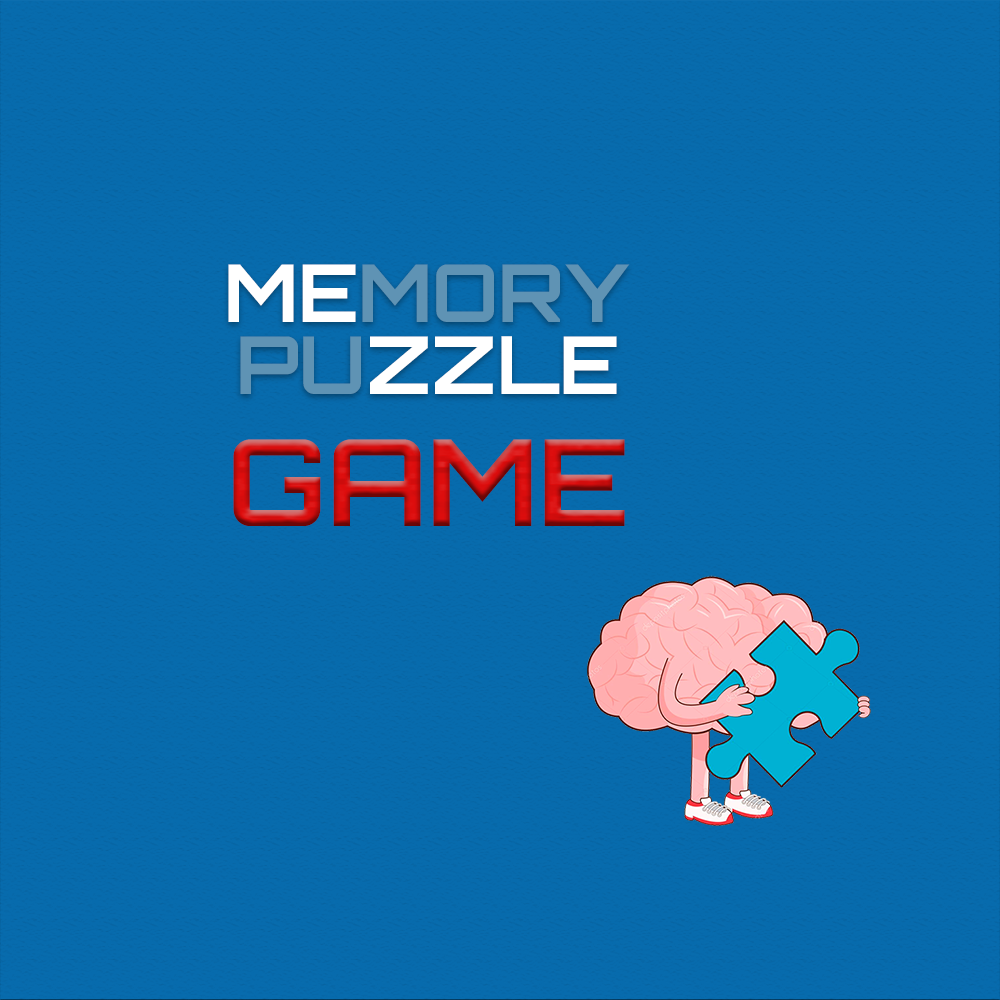
<style>
.page{position:relative;width:1000px;height:1000px;background:#076bad}
.page>*{position:absolute;margin:0}
.t1{font:80px "Orbitron-Bold";color:#5f93b4}
.t2{font:80px "Orbitron-Bold";color:#ffffff}
.t3{font:120px "Orbitron-Bold"}
</style>
<div class="page">
<p class="t1" style="left:228px;top:264px;width:402px;height:58px"><span class="t2">ME</span>MORY</p>
<p class="t2" style="left:240px;top:336px;width:377px;height:58px"><span class="t1">PU</span>ZZLE</p>
<p class="t3" style="left:233px;top:439px;width:392px;height:87px">GAME</p>
</div>
